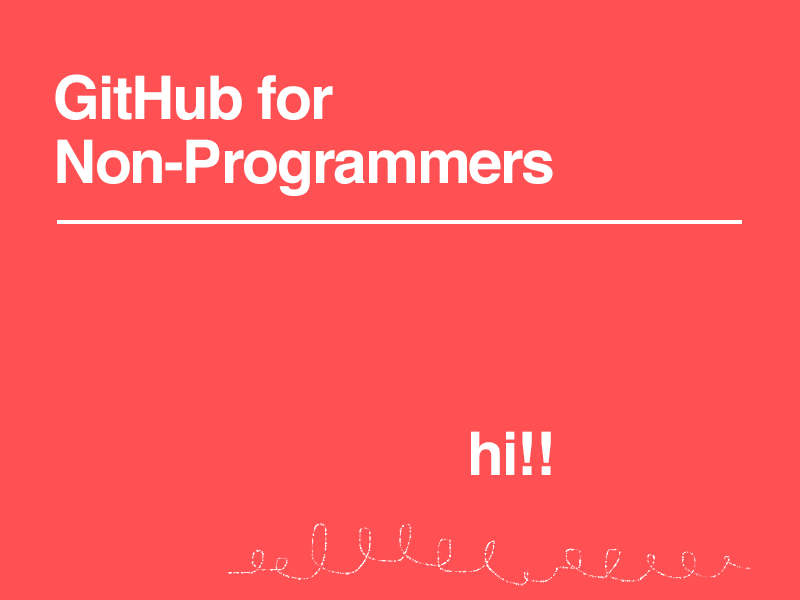
<style>
.page{position:relative;width:800px;height:600px;background:#ff5154}
.page>*{position:absolute;margin:0}
.t1{font:60px/64px "Helvetica-Bold";letter-spacing:-0.03em;color:#ffffff}
.t2{font:60px "Helvetica-Bold";letter-spacing:-0.03em;color:#ffffff}
</style>
<div class="page">
<p class="t1" style="left:55px;top:74px;width:498px;height:122px">GitHub for Non-Programmers</p>
<p class="t2" style="left:471px;top:431px;width:80px;height:44px">hi!!</p>
</div>
